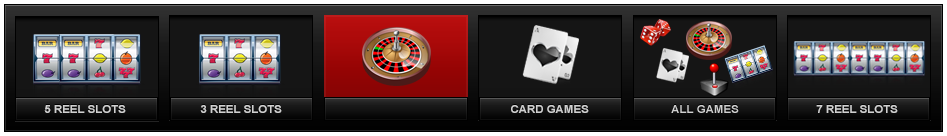
<style>
.page{position:relative;width:947px;height:136px}
.page>*{position:absolute;margin:0}
.t1{font:11.3px "Arial-BoldMT";color:#d0d0d0}
</style>
<div class="page">
<p class="t1" style="left:44px;top:105px;width:82px;height:8px">5 REEL SLOTS</p>
<p class="t1" style="left:200px;top:105px;width:82px;height:8px">3 REEL SLOTS</p>
<p class="t1" style="left:511px;top:105px;width:78px;height:8px">CARD GAMES</p>
<p class="t1" style="left:816px;top:105px;width:82px;height:8px">7 REEL SLOTS</p>
</div>
